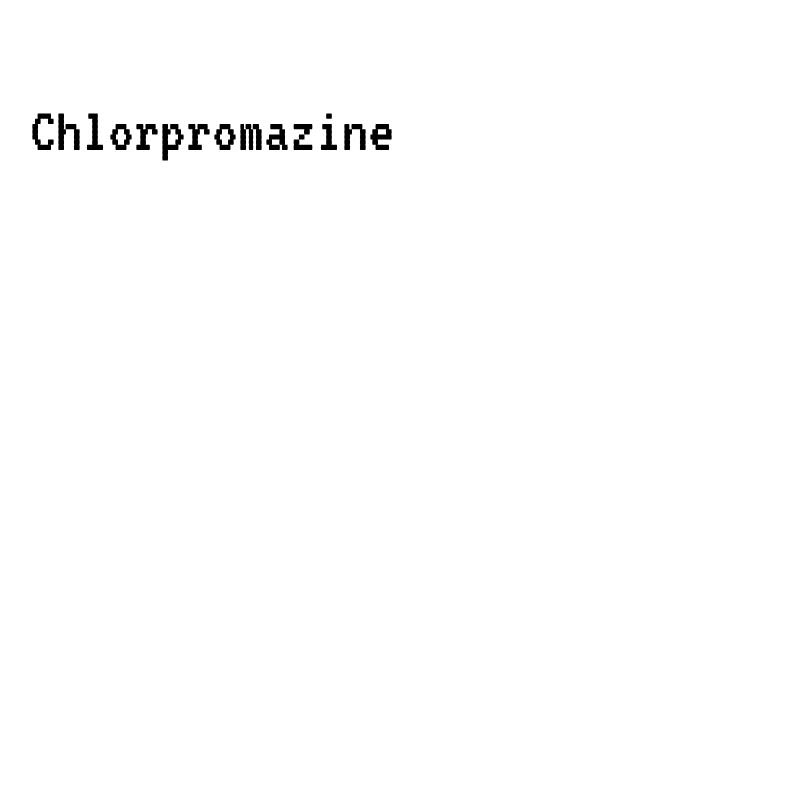
<style>
.page{position:relative;width:800px;height:800px;background:#ffffff}
.page>*{position:absolute;margin:0}
.t1{font:65px "VT323-Regular";color:#000000}
</style>
<div class="page">
<p class="t1" style="left:32px;top:113px;width:360px;height:48px">Chlorpromazine</p>
</div>
